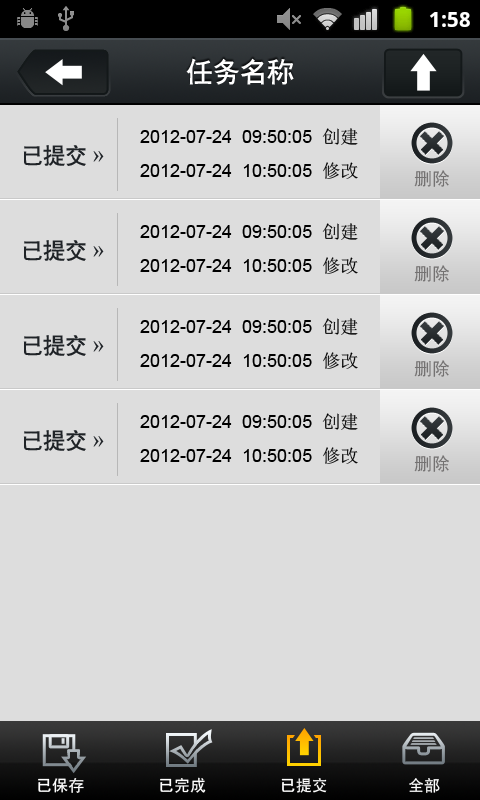
<style>
.page{position:relative;width:480px;height:800px;background:#dddddd}
.page>*{position:absolute;margin:0}
.t1{font:27px "CTCuHeiSJ";color:#ffffff}
.t2{font:18px "ArialMT";color:#000000}
.t3{font:18px "SimSun";color:#000000}
.t4{font:22px "CTCuHeiSJ";color:#1f2327}
.t5{font:22px "SimSun";color:#1f2327}
.t6{font:18px "SimHei";color:#747272}
.t7{font:16px "SimHei";color:#ffffff}
</style>
<div class="page">
<p class="t1" style="left:186px;top:58px;width:108px;height:27px">任务名称</p>
<p class="t2" style="left:140px;top:128px;width:218px;height:17px">2012-07-24  09:50:05  <span class="t3">创建</span></p>
<p class="t4" style="left:23px;top:145px;width:81px;height:21px">已提交 <span class="t5">»</span></p>
<p class="t2" style="left:140px;top:162px;width:218px;height:17px">2012-07-24  10:50:05  <span class="t3">修改</span></p>
<p class="t6" style="left:414px;top:170px;width:35px;height:17px">删除</p>
<p class="t2" style="left:140px;top:223px;width:218px;height:17px">2012-07-24  09:50:05  <span class="t3">创建</span></p>
<p class="t4" style="left:23px;top:240px;width:81px;height:21px">已提交 <span class="t5">»</span></p>
<p class="t2" style="left:140px;top:257px;width:218px;height:17px">2012-07-24  10:50:05  <span class="t3">修改</span></p>
<p class="t6" style="left:414px;top:265px;width:35px;height:17px">删除</p>
<p class="t2" style="left:140px;top:318px;width:218px;height:17px">2012-07-24  09:50:05  <span class="t3">创建</span></p>
<p class="t4" style="left:23px;top:335px;width:81px;height:21px">已提交 <span class="t5">»</span></p>
<p class="t2" style="left:140px;top:352px;width:218px;height:17px">2012-07-24  10:50:05  <span class="t3">修改</span></p>
<p class="t6" style="left:414px;top:360px;width:35px;height:17px">删除</p>
<p class="t2" style="left:140px;top:413px;width:218px;height:17px">2012-07-24  09:50:05  <span class="t3">创建</span></p>
<p class="t4" style="left:23px;top:430px;width:81px;height:21px">已提交 <span class="t5">»</span></p>
<p class="t2" style="left:140px;top:447px;width:218px;height:17px">2012-07-24  10:50:05  <span class="t3">修改</span></p>
<p class="t6" style="left:414px;top:455px;width:35px;height:17px">删除</p>
<p class="t7" style="left:38px;top:778px;width:46px;height:15px">已保存</p>
<p class="t7" style="left:160px;top:777px;width:46px;height:16px">已完成</p>
<p class="t7" style="left:281px;top:778px;width:46px;height:15px">已提交</p>
<p class="t7" style="left:409px;top:778px;width:31px;height:15px">全部</p>
</div>
